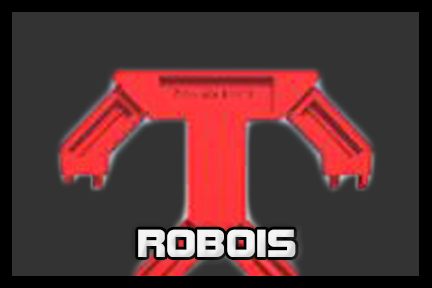
<style>
.page{position:relative;width:432px;height:288px;background:#333333}
.page>*{position:absolute;margin:0}
.t1{font:41.7px "BolsterBold";color:#f3f3f3}
</style>
<div class="page">
<p class="t1" style="left:138px;top:229px;width:158px;height:28px">ROBOIS</p>
</div>
